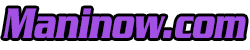
<style>
.page{position:relative;width:250px;height:50px;background:#ffffff}
.page>*{position:absolute;margin:0}
.t1{font:45.9px "Serpentine-BoldOblique";color:#a350e4;scale:0.68 1}
</style>
<div class="page">
<p class="t1" style="left:3px;top:8px;width:243px;height:30px">Maninow.com</p>
</div>
